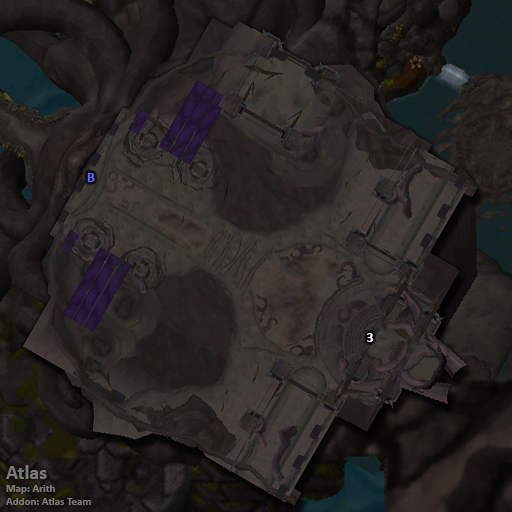
<style>
.page{position:relative;width:512px;height:512px}
.page>*{position:absolute;margin:0}
.t1{font:14px "Calibri-Bold";color:#6666ff}
.t2{font:14px "Calibri-Bold";color:#ffffff}
.t3{font:11px "Calibri-Bold";color:#7c7b7a}
.t4{font:20px "Calibri-Bold";color:#7c7b7a}
</style>
<div class="page">
<p class="t1" style="left:87px;top:173px;width:8px;height:9px">B</p>
<p class="t2" style="left:367px;top:333px;width:6px;height:9px">3</p>
<p class="t3" style="left:6px;top:465px;width:85px;height:40px"><span class="t4">Atlas<br></span>Map: Arith<br>Addon: Atlas Team</p>
</div>
